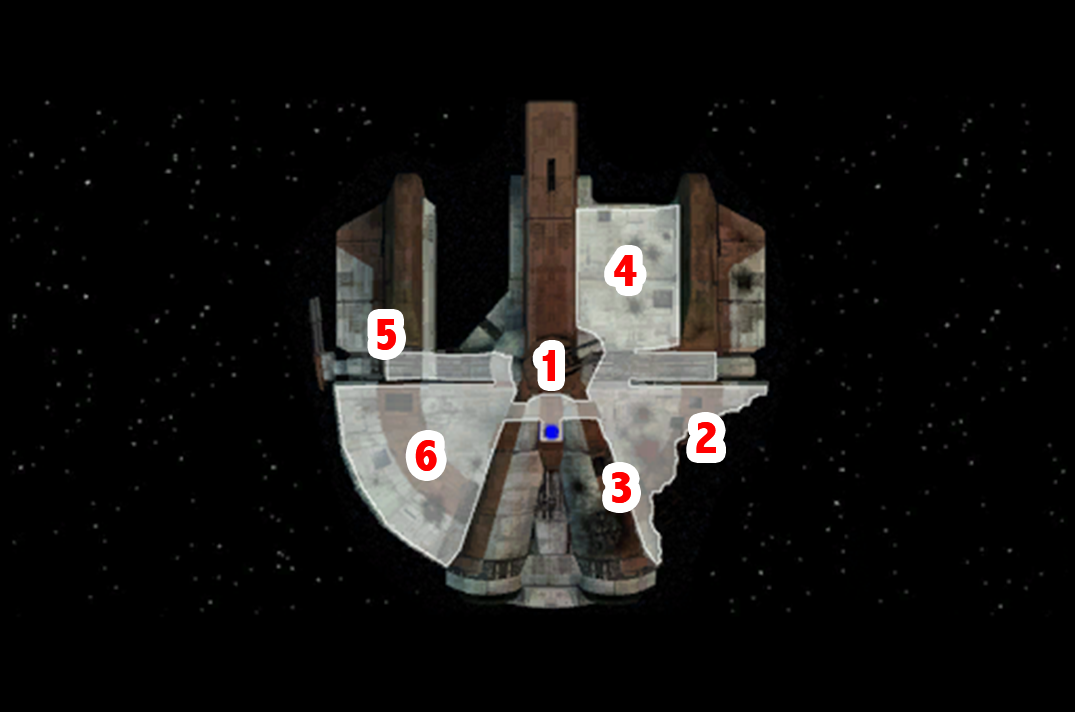
<style>
.page{position:relative;width:1075px;height:712px;background:#000000}
.page>*{position:absolute;margin:0}
.t1{font:48px "AbadiMT-CondensedExtraBold";color:#ff0000}
</style>
<div class="page">
<p class="t1" style="left:614px;top:255px;width:23px;height:31px">4</p>
<p class="t1" style="left:377px;top:319px;width:19px;height:31px">5</p>
<p class="t1" style="left:542px;top:350px;width:13px;height:31px">1</p>
<p class="t1" style="left:696px;top:422px;width:20px;height:31px">2</p>
<p class="t1" style="left:415px;top:440px;width:22px;height:31px">6</p>
<p class="t1" style="left:612px;top:472px;width:19px;height:31px">3</p>
</div>
